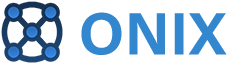
<style>
.page{position:relative;width:232px;height:64px;background:#ffffff}
.page>*{position:absolute;margin:0}
.t1{font:60px "AcuminConcept-Bold";color:#3287cf}
</style>
<div class="page">
<p class="t1" style="left:81px;top:12px;width:146px;height:43px">ONIX</p>
</div>
